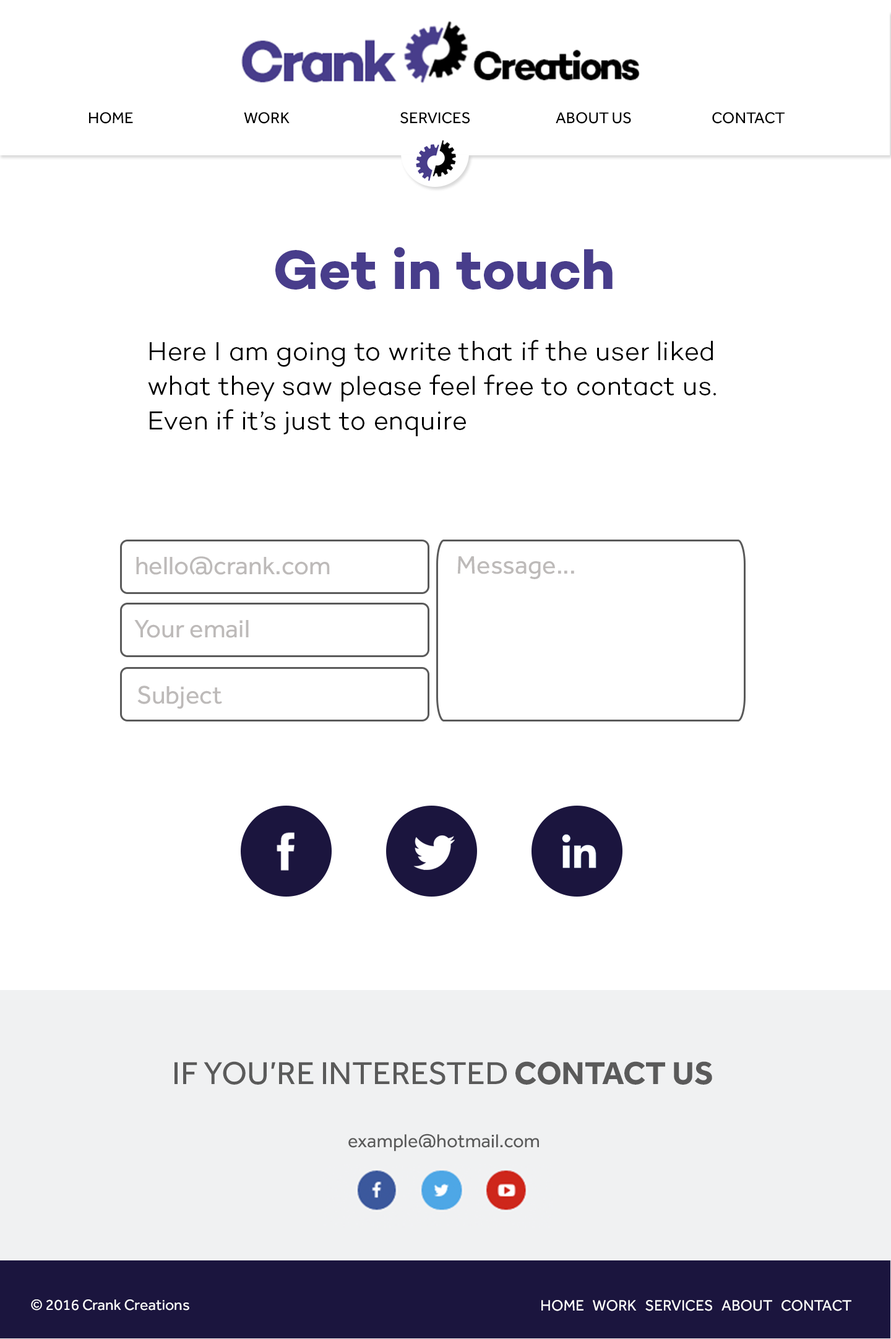
<style>
.page{position:relative;width:891px;height:1339px;background:#ffffff}
.page>*{position:absolute;margin:0}
.t1{font:16.1px "Effra-Regular";color:#000000}
.t2{font:56.3px "Campton-BoldDEMO";color:#483d8b}
.t3{font:26.6px/34.6px "Campton-LightDEMO";color:#000000}
.t4{font:26px "Effra-Regular";color:#bdbab9}
.t5{font:32.8px "Effra-Regular";color:#5a5a5a;text-transform:uppercase}
.t6{font:32.8px "Effra-Bold";color:#5a5a5a;text-transform:uppercase}
.t7{font:19.2px "Effra-Regular";color:#5a5a5a}
.t8{font:15.5px "Effra-Regular";color:#ffffff}
</style>
<div class="page">
<p class="t1" style="left:89px;top:112px;width:695px;height:12px">HOME     WORK     SERVICES    ABOUT US    CONTACT</p>
<p class="t2" style="left:275px;top:247px;width:337px;height:43px">Get in touch</p>
<p class="t3" style="left:148px;top:340px;width:568px;height:96px">Here I am going to write that if the user liked what they saw please feel free to contact us. Even if it’s just to enquire</p>
<p class="t4" style="left:136px;top:556px;width:194px;height:19px">hello@crank.com</p>
<p class="t4" style="left:457px;top:556px;width:117px;height:23px">Message...</p>
<p class="t4" style="left:134px;top:620px;width:115px;height:18px">Your email</p>
<p class="t4" style="left:137px;top:685px;width:85px;height:24px">Subject</p>
<p class="t5" style="left:174px;top:1061px;width:538px;height:23px">if you’re interested <span class="t6">Contact us</span></p>
<p class="t7" style="left:348px;top:1133px;width:191px;height:18px">example@hotmail.com</p>
<p class="t8" style="left:31px;top:1299px;width:158px;height:11px">© 2016 Crank Creations</p>
<p class="t8" style="left:541px;top:1300px;width:310px;height:11px">HOME   WORK   SERVICES   ABOUT   CONTACT</p>
</div>
